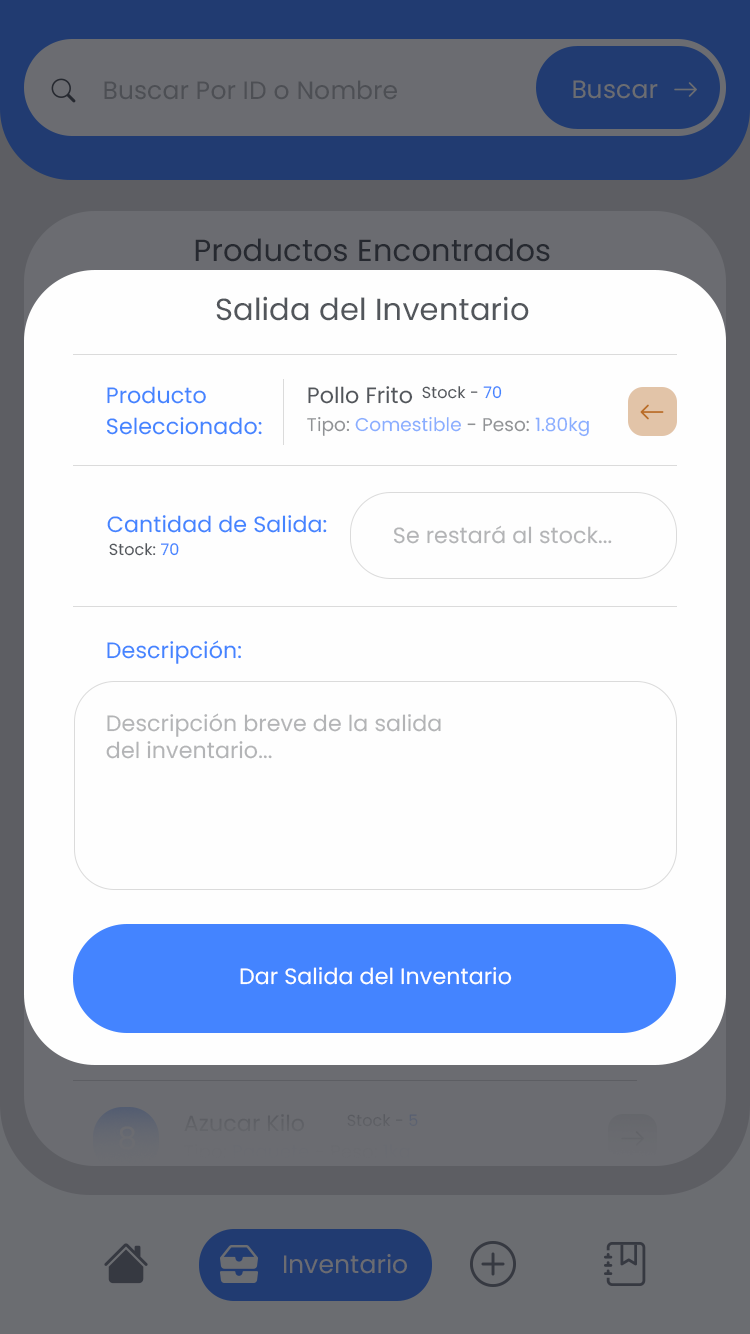
<style>
.page{position:relative;width:750px;height:1334px;background:#fefefe}
.page>*{position:absolute;margin:0}
.t1{font:30.6px "Poppins-Regular";letter-spacing:0.005em;color:#52565b}
.t2{font:22.1px "Poppins-Regular";letter-spacing:0.005em;color:#4484ff}
.t3{font:22.1px "Poppins-Regular";letter-spacing:0.005em;color:#52565b}
.t4{font:22.1px "Poppins-Regular";letter-spacing:0.005em;color:#52565b;text-transform:uppercase}
.t5{font:16px "Poppins-Regular";letter-spacing:0.005em;color:#52565b}
.t6{font:16px "Poppins-Regular";letter-spacing:0.005em;color:#52565b;text-transform:uppercase}
.t7{font:16px "Poppins-Regular";letter-spacing:0.005em;color:#4484ff}
.t8{font:18.4px "Poppins-Regular";letter-spacing:0.005em}
.t9{font:22.1px "Poppins-Regular";letter-spacing:0.005em;color:#b3b4b6}
.t10{font:22.1px "Poppins-Regular";letter-spacing:0.005em;color:#ffffff}
.t11{font:25px "Poppins-Regular";letter-spacing:0.005em;color:#6b6c71}
</style>
<div class="page">
<p class="t1" style="left:216px;top:296px;width:313px;height:25px">Salida del Inventario</p>
<p class="t2" style="left:107px;top:386px;width:99px;height:18px">Producto</p>
<p class="t3" style="left:308px;top:386px;width:105px;height:18px"><span class="t4">p</span>ollo Frito</p>
<p class="t5" style="left:422px;top:386px;width:80px;height:13px"><span class="t6">S</span>tock - <span class="t7">70</span></p>
<p class="t2" style="left:107px;top:417px;width:155px;height:18px">Seleccionado:</p>
<p class="t8" style="left:307px;top:416px;width:282px;height:21px">Tipo: Comestible - Peso: 1.80kg</p>
<p class="t2" style="left:107px;top:515px;width:220px;height:18px">Cantidad de Salida:</p>
<p class="t9" style="left:394px;top:525px;width:218px;height:19px">Se restará al stock...</p>
<p class="t5" style="left:109px;top:543px;width:70px;height:13px"><span class="t6">S</span>tock: <span class="t7">70</span></p>
<p class="t2" style="left:107px;top:640px;width:134px;height:24px">Descripción:</p>
<p class="t9" style="left:106px;top:713px;width:335px;height:46px">Descripción breve de la salida <br>del inventario...</p>
<p class="t10" style="left:240px;top:967px;width:272px;height:18px">Dar Salida del Inventario</p>
<p class="t11" style="left:284px;top:1254px;width:123px;height:20px">Inventario</p>
</div>
